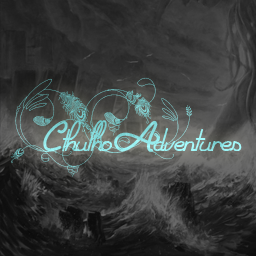
<style>
.page{position:relative;width:256px;height:256px}
.page>*{position:absolute;margin:0}
.t1{font:60px "HeleneQueen.K";color:#91e7e8}
</style>
<div class="page">
<p class="t1" style="left:10px;top:77px;width:232px;height:100px">Cthulho Adventures</p>
</div>
